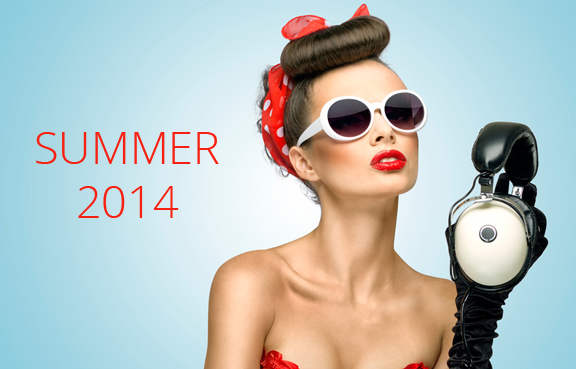
<style>
.page{position:relative;width:576px;height:369px}
.page>*{position:absolute;margin:0}
.t1{font:45px "OpenSans-Light";color:#f82011}
</style>
<div class="page">
<p class="t1" style="left:36px;top:132px;width:183px;height:86px;text-align:center">SUMMER<br>2014</p>
</div>
